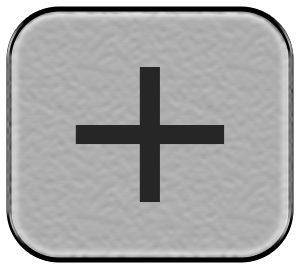
<style>
.page{position:relative;width:300px;height:269px}
.page>*{position:absolute;margin:0}
.t1{font:271.8px "CenturyGothic";color:#262626;scale:1.1 1}
</style>
<div class="page">
<p class="t1" style="left:75px;top:67px;width:150px;height:135px">+</p>
</div>
